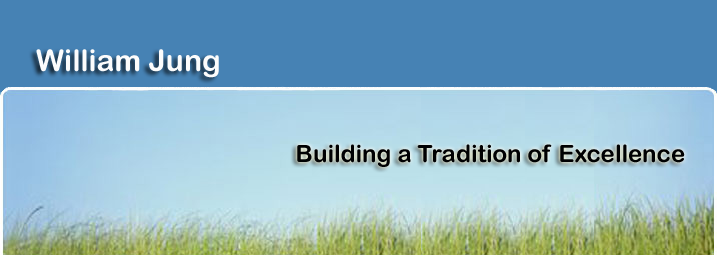
<style>
.page{position:relative;width:717px;height:255px;background:#4682b4}
.page>*{position:absolute;margin:0}
.t1{font:30px "ArialRoundedMTBold";color:#fcfcfc}
.t2{font:24px "ArialRoundedMTBold";color:#000104}
</style>
<div class="page">
<p class="t1" style="left:36px;top:49px;width:183px;height:29px">William Jung</p>
<p class="t2" style="left:297px;top:144px;width:388px;height:23px">Building a Tradition of Excellence</p>
</div>
